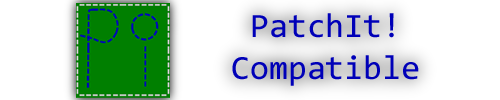
<style>
.page{position:relative;width:500px;height:100px;background:#ffffff}
.page>*{position:absolute;margin:0}
.t1{font:34.3px "Consolas";color:#0000b8}
</style>
<div class="page">
<p class="t1" style="left:232px;top:13px;width:187px;height:73px;text-align:center">PatchIt! Compatible</p>
</div>
